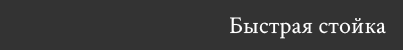
<style>
.page{position:relative;width:403px;height:50px;background:#333333}
.page>*{position:absolute;margin:0}
.t1{font:24px "CrimsonText-Regular";color:#ffffff}
</style>
<div class="page">
<p class="t1" style="left:230px;top:17px;width:156px;height:22px">Быстрая стойка</p>
</div>
